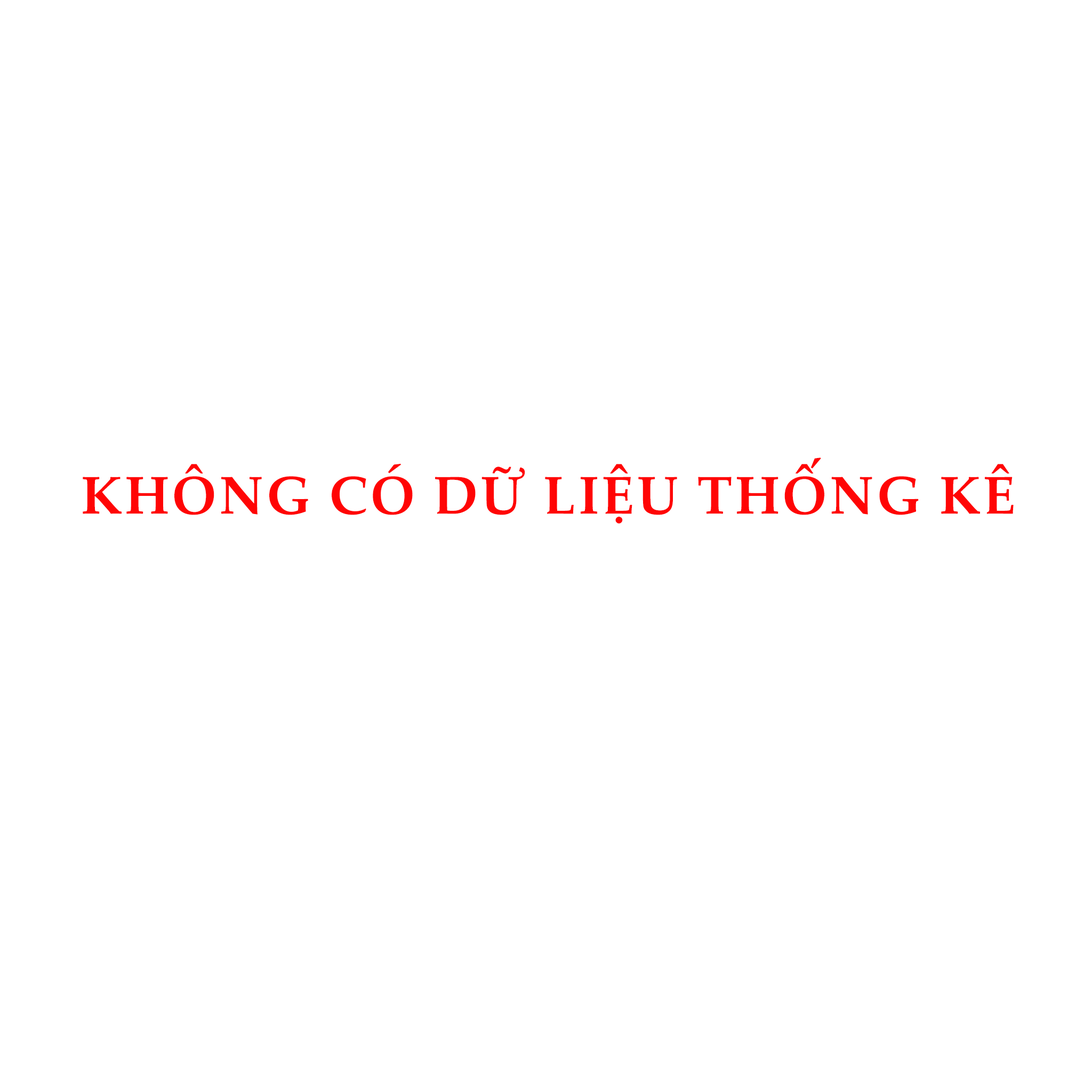
<style>
.page{position:relative;width:1092px;height:1092px;background:#ffffff}
.page>*{position:absolute;margin:0}
.t1{font:53.3px "PalatinoLinotype-Bold";letter-spacing:0.05em;color:#ff0505}
</style>
<div class="page">
<p class="t1" style="left:83px;top:457px;width:931px;height:67px">KHÔNG CÓ DỮ LIỆU THỐNG KÊ</p>
</div>
